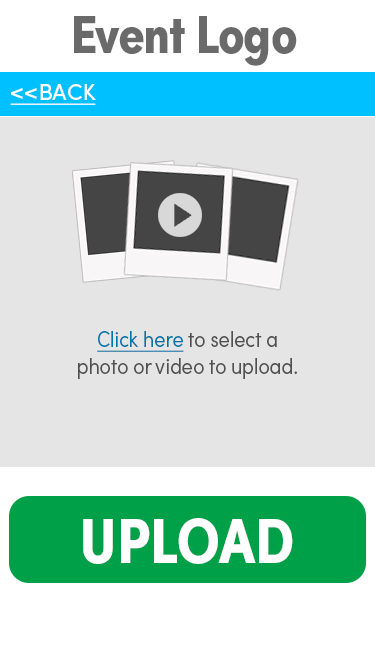
<style>
.page{position:relative;width:375px;height:667px;background:#e5e5e5}
.page>*{position:absolute;margin:0}
.t1{font:54.2px "SofiaProBoldCondensed";letter-spacing:-0.02em;color:#6a6a6a}
.t2{font:22.6px "SofiaProRegular";color:#ffffff;text-decoration:underline}
.t3{font:22.6px "SofiaProLightCondensed";color:#515050}
.t4{font:22.6px "SofiaProLightCondensed";color:#0176ac;text-decoration:underline}
.t5{font:63.2px "SofiaProBoldCondensed";color:#ffffff}
</style>
<div class="page">
<p class="t1" style="left:74px;top:16px;width:223px;height:50px">Event Logo</p>
<p class="t2" style="left:10px;top:84px;width:86px;height:21px">&lt;&lt;BACK</p>
<p class="t3" style="left:78px;top:331px;width:219px;height:48px;text-align:center"><span class="t4">Click here</span> to select a <br>photo or video to upload.</p>
<p class="t5" style="left:83px;top:518px;width:210px;height:46px">UPLOAD</p>
</div>
